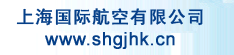
<style>
.page{position:relative;width:234px;height:55px;background:#ffffff}
.page>*{position:absolute;margin:0}
.t1{font:18px "SimHei";letter-spacing:0.025em;color:#053f88;font-weight:bold}
.t2{font:18px "ArialMT";letter-spacing:0.025em;color:#053f88;font-weight:bold}
</style>
<div class="page">
<p class="t1" style="left:16px;top:8px;width:187px;height:18px">上海国际航空有限公司</p>
<p class="t2" style="left:45px;top:32px;width:130px;height:17px">www.shgjhk.cn</p>
</div>
